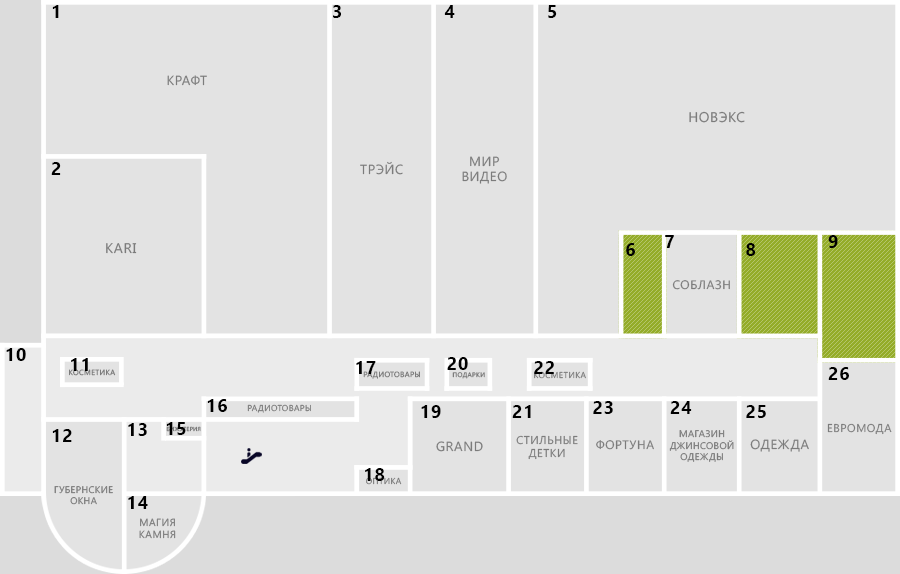
<style>
.page{position:relative;width:900px;height:574px;background:#e3e3e3}
.page>*{position:absolute;margin:0}
.t1{font:18px "SegoeUI-Bold";letter-spacing:0.05em;color:#000000;text-transform:uppercase}
.t2{font:13.2px "SegoeUI";letter-spacing:0.05em;color:#7c7c7c;text-transform:uppercase}
.t3{font:14px "SegoeUI";letter-spacing:0.05em;color:#7c7c7c;text-transform:uppercase}
.t4{font:12.2px "SegoeUI";letter-spacing:0.05em;color:#7c7c7c;text-transform:uppercase}
.t5{font:7.5px "SegoeUI";letter-spacing:0.05em;color:#7c7c7c;text-transform:uppercase}
.t6{font:6.6px "SegoeUI";letter-spacing:0.05em;color:#7c7c7c;text-transform:uppercase}
.t7{font:8.5px "SegoeUI";letter-spacing:0.05em;text-transform:uppercase}
.t8{font:8.5px "SegoeUI";letter-spacing:0.05em;color:#7c7c7c;text-transform:uppercase}
.t9{font:11.3px "SegoeUI";letter-spacing:0.05em;color:#7c7c7c;text-transform:uppercase}
.t10{font:5.6px "SegoeUI";letter-spacing:0.05em;color:#7c7c7c;text-transform:uppercase}
.t11{font:9.4px "SegoeUI";letter-spacing:0.05em;color:#7c7c7c;text-transform:uppercase}
.t12{font:10.3px "SegoeUI";letter-spacing:0.05em;color:#7c7c7c;text-transform:uppercase}
</style>
<div class="page">
<p class="t1" style="left:52px;top:5px;width:7px;height:13px">1</p>
<p class="t1" style="left:333px;top:5px;width:8px;height:13px">3</p>
<p class="t1" style="left:444px;top:5px;width:11px;height:13px">4</p>
<p class="t1" style="left:548px;top:5px;width:9px;height:13px">5</p>
<p class="t2" style="left:167px;top:75px;width:40px;height:11px">Крафт</p>
<p class="t3" style="left:689px;top:111px;width:56px;height:12px">Новэкс</p>
<p class="t2" style="left:360px;top:161px;width:43px;height:14px">трэйс</p>
<p class="t2" style="left:462px;top:156px;width:45px;height:28px;text-align:center">Мир<br>видео</p>
<p class="t1" style="left:51px;top:162px;width:10px;height:13px">2</p>
<p class="t3" style="left:106px;top:243px;width:31px;height:11px">Kari</p>
<p class="t1" style="left:626px;top:243px;width:9px;height:13px">6</p>
<p class="t1" style="left:665px;top:235px;width:9px;height:13px">7</p>
<p class="t1" style="left:746px;top:243px;width:10px;height:13px">8</p>
<p class="t1" style="left:828px;top:235px;width:10px;height:13px">9</p>
<p class="t4" style="left:672px;top:280px;width:58px;height:10px">Соблазн</p>
<p class="t1" style="left:6px;top:348px;width:20px;height:13px">10</p>
<p class="t1" style="left:71px;top:358px;width:17px;height:13px">11</p>
<p class="t1" style="left:356px;top:361px;width:20px;height:13px">17</p>
<p class="t1" style="left:447px;top:357px;width:21px;height:13px">20</p>
<p class="t1" style="left:534px;top:361px;width:20px;height:13px">22</p>
<p class="t5" style="left:69px;top:369px;width:47px;height:7px">Косметика</p>
<p class="t5" style="left:363px;top:371px;width:57px;height:8px">Радиотовары</p>
<p class="t6" style="left:452px;top:372px;width:33px;height:7px">Подарки</p>
<p class="t7" style="left:534px;top:371px;width:52px;height:8px">Косметика</p>
<p class="t1" style="left:828px;top:367px;width:21px;height:13px">26</p>
<p class="t1" style="left:207px;top:399px;width:20px;height:13px">16</p>
<p class="t1" style="left:593px;top:401px;width:20px;height:13px">23</p>
<p class="t1" style="left:670px;top:401px;width:22px;height:13px">24</p>
<p class="t8" style="left:247px;top:404px;width:64px;height:9px">Радиотовары</p>
<p class="t1" style="left:421px;top:405px;width:20px;height:13px">19</p>
<p class="t1" style="left:512px;top:405px;width:19px;height:13px">21</p>
<p class="t1" style="left:746px;top:405px;width:20px;height:13px">25</p>
<p class="t1" style="left:128px;top:423px;width:19px;height:13px">13</p>
<p class="t1" style="left:166px;top:422px;width:20px;height:13px">15</p>
<p class="t9" style="left:827px;top:423px;width:65px;height:12px">Евромода</p>
<p class="t1" style="left:52px;top:429px;width:20px;height:13px">12</p>
<p class="t10" style="left:166px;top:426px;width:35px;height:6px">Бижутерия</p>
<p class="t9" style="left:516px;top:435px;width:62px;height:25px;text-align:center">Стильные<br>детки</p>
<p class="t11" style="left:669px;top:430px;width:65px;height:32px;text-align:center">Магазин<br>джинсовой<br>одежды</p>
<p class="t2" style="left:436px;top:441px;width:47px;height:11px">GRAND</p>
<p class="t4" style="left:596px;top:440px;width:58px;height:10px">Фортуна</p>
<p class="t2" style="left:750px;top:439px;width:59px;height:13px">Одежда</p>
<p class="t1" style="left:365px;top:468px;width:20px;height:13px">18</p>
<p class="t11" style="left:54px;top:486px;width:59px;height:19px;text-align:center">Губернские<br>окна</p>
<p class="t8" style="left:366px;top:477px;width:36px;height:8px">Оптика</p>
<p class="t1" style="left:128px;top:496px;width:20px;height:13px">14</p>
<p class="t12" style="left:139px;top:518px;width:37px;height:21px;text-align:center">магия<br>камня</p>
</div>
